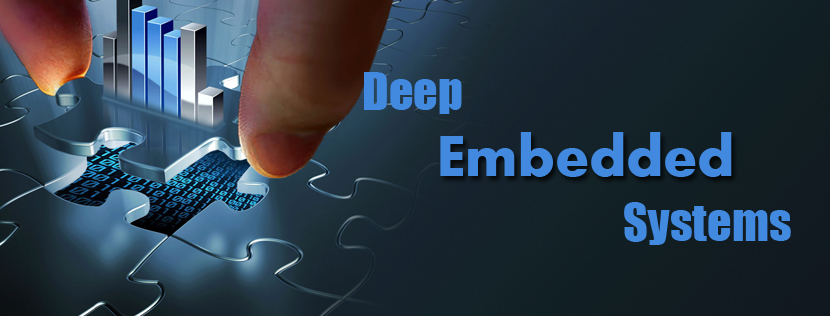
<style>
.page{position:relative;width:830px;height:320px}
.page>*{position:absolute;margin:0}
.t1{font:48.3px "Impact";color:#428adf}
</style>
<div class="page">
<p class="t1" style="left:364px;top:72px;width:98px;height:42px">Deep</p>
<p class="t1" style="left:624px;top:202px;width:167px;height:43px">Systems</p>
</div>
